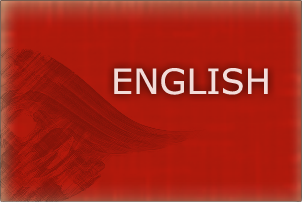
<style>
.page{position:relative;width:302px;height:202px}
.page>*{position:absolute;margin:0}
.t1{font:35px "Verdana";color:#f2dbd8}
</style>
<div class="page">
<p class="t1" style="left:114px;top:68px;width:154px;height:27px">ENGLISH</p>
</div>
